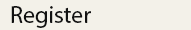
<style>
.page{position:relative;width:191px;height:30px;background:#f3f1e9}
.page>*{position:absolute;margin:0}
.t1{font:24px "MyriadPro-Regular";color:#111111}
</style>
<div class="page">
<p class="t1" style="left:11px;top:6px;width:80px;height:22px">Register</p>
</div>
